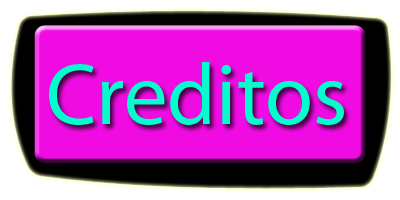
<style>
.page{position:relative;width:400px;height:200px;background:#f00be3}
.page>*{position:absolute;margin:0}
.t1{font:87px "MyriadPro-Regular";color:#00ffcc}
</style>
<div class="page">
<p class="t1" style="left:49px;top:62px;width:295px;height:63px">Creditos</p>
</div>
